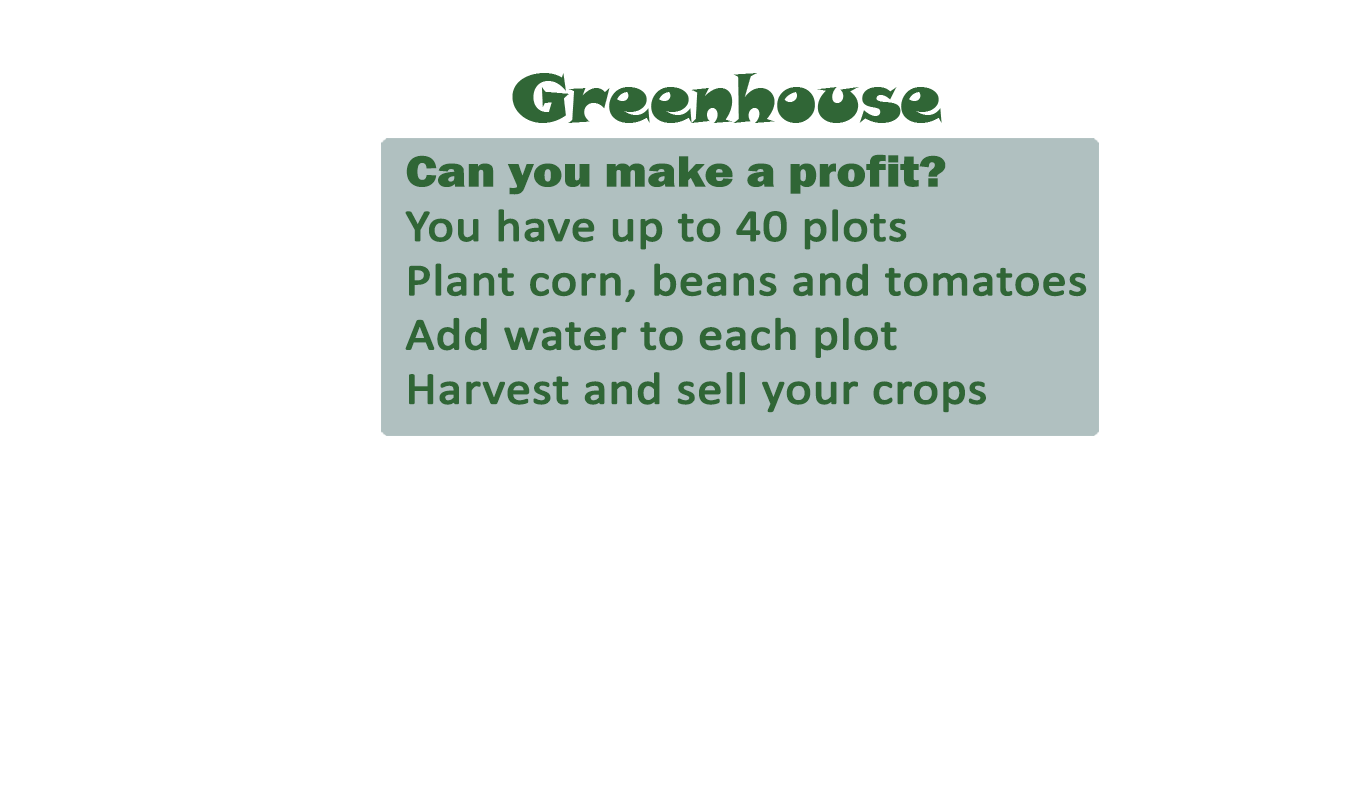
<style>
.page{position:relative;width:1365px;height:786px;background:#ffffff}
.page>*{position:absolute;margin:0}
.t1{font:45.2px "Calibri";color:#306636;font-weight:bold;scale:1.11 1}
.t2{font:45.2px "FranklinGothic-Heavy";color:#306636;scale:1.11 1}
</style>
<div class="page">
<p class="t1" style="left:405px;top:154px;width:682px;height:259px"><span class="t2">Can you make a profit?<br></span>You have up to 40 plots<br>Plant corn, beans and tomatoes<br>Add water to each plot<br>Harvest and sell your crops</p>
</div>
